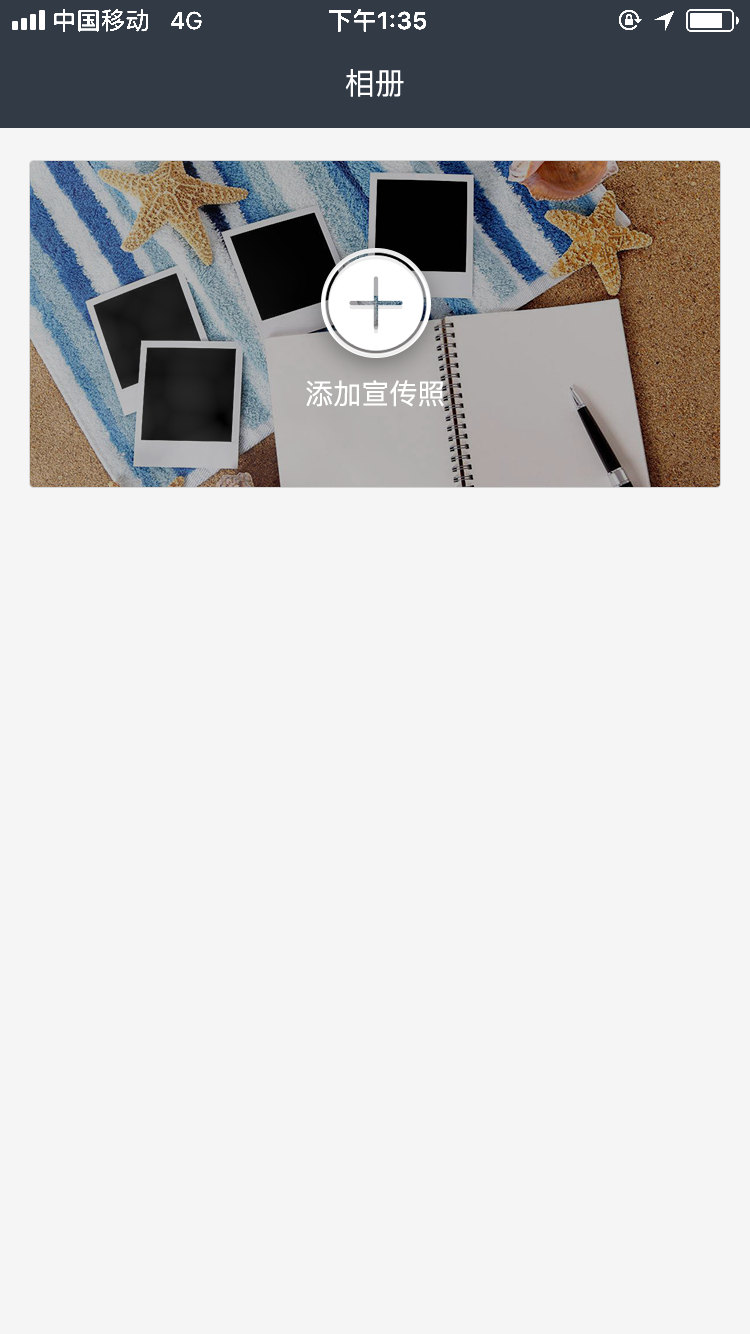
<style>
.page{position:relative;width:750px;height:1334px;background:#f5f5f5}
.page>*{position:absolute;margin:0}
.t1{font:30px "PingFang-SC-Medium";color:#ffffff}
.t2{font:28px "PingFangSC-Regular";color:#ffffff}
</style>
<div class="page">
<p class="t1" style="left:345px;top:69px;width:59px;height:28px">相册</p>
<p class="t2" style="left:306px;top:380px;width:138px;height:27px">添加宣传照</p>
</div>
